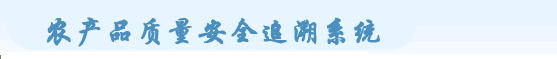
<style>
.page{position:relative;width:557px;height:59px;background:#e6f5ff}
.page>*{position:absolute;margin:0}
.t1{font:30px "STXingkai";color:#4a8fbe;font-weight:bold}
</style>
<div class="page">
<p class="t1" style="left:46px;top:17px;width:334px;height:30px">农产品质量安全追溯系统</p>
</div>
